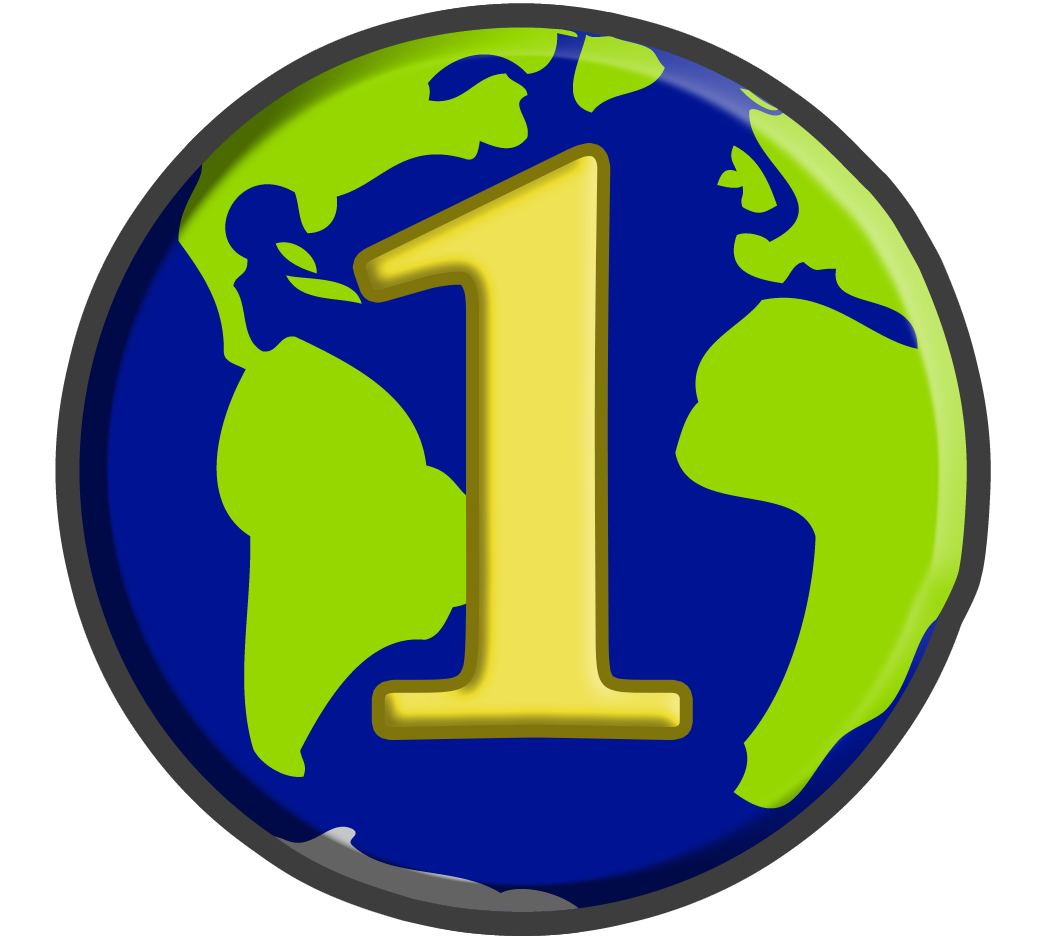
<style>
.page{position:relative;width:1046px;height:946px;background:#ffffff}
.page>*{position:absolute;margin:0}
.t1{font:833.3px "ACaslonPro-Bold"}
</style>
<div class="page">
<p class="t1" style="left:365px;top:156px;width:315px;height:572px">1</p>
</div>
